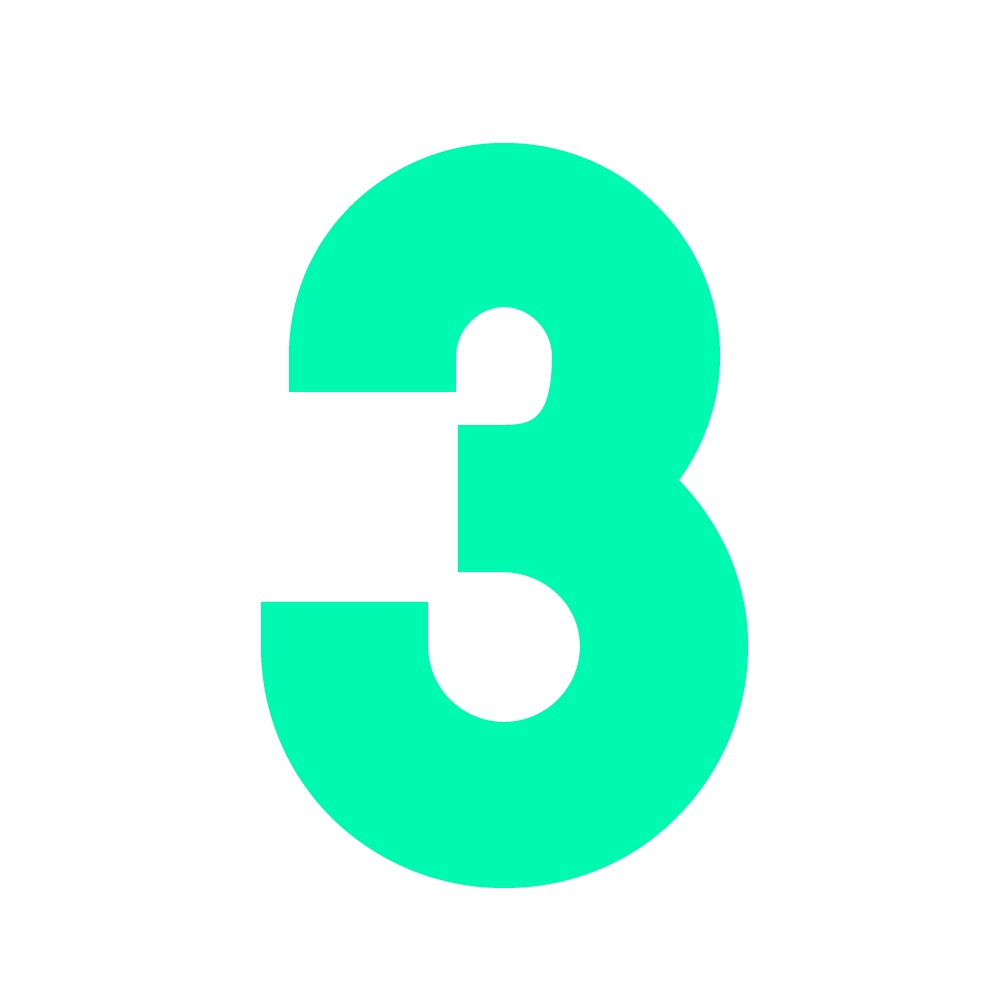
<style>
.page{position:relative;width:1000px;height:1000px;background:#ffffff}
.page>*{position:absolute;margin:0}
.t1{font:1000px "Biko-Black";color:#00f9b0}
</style>
<div class="page">
<p class="t1" style="left:261px;top:143px;width:487px;height:745px">3</p>
</div>
